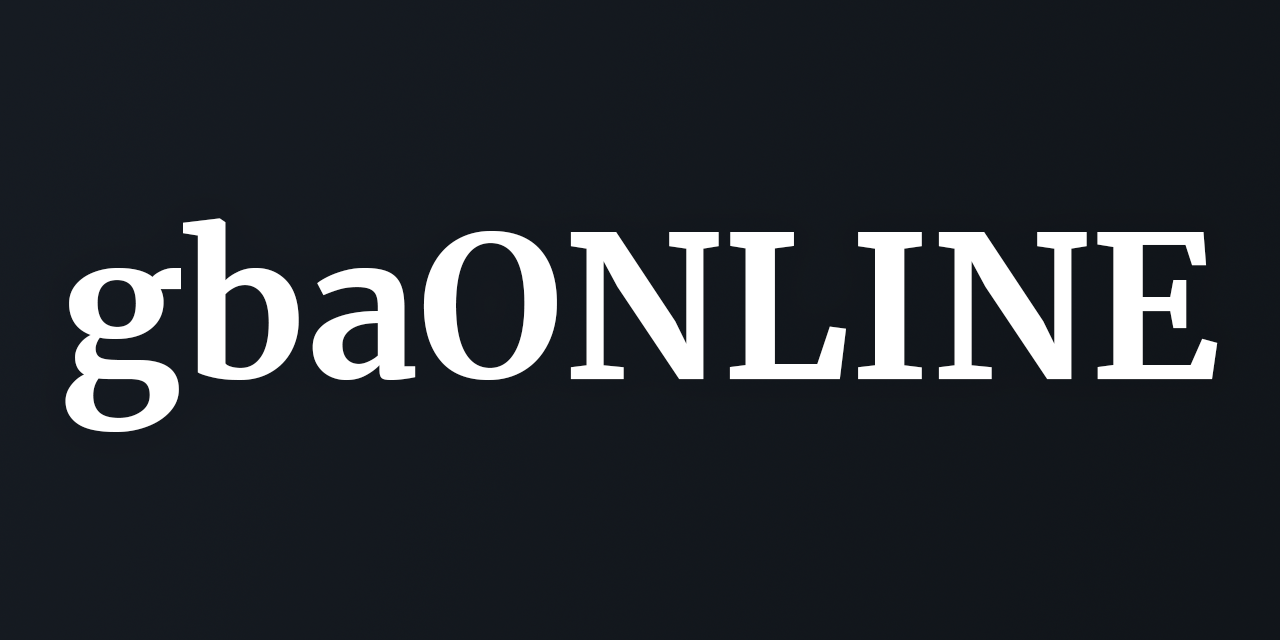
<style>
.page{position:relative;width:1280px;height:640px}
.page>*{position:absolute;margin:0}
.t1{font:198.7px "Merriweather-Bold";color:#ffffff}
</style>
<div class="page">
<p class="t1" style="left:65px;top:218px;width:1153px;height:214px">gbaONLINE</p>
</div>
